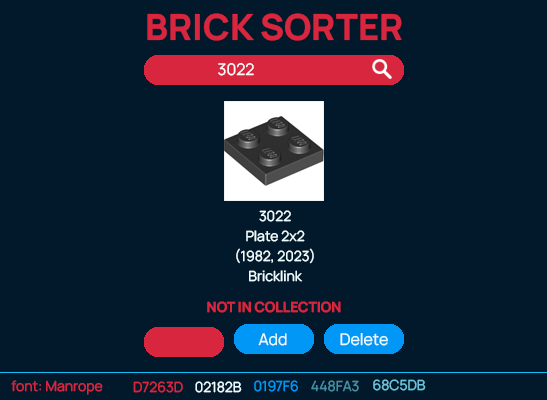
<style>
.page{position:relative;width:547px;height:400px;background:#02182b}
.page>*{position:absolute;margin:0}
.t1{font:36px "ManropeExtraLight-ExtraBold";color:#d7263d}
.t2{font:16px "ManropeExtraLight-Regular";color:#ffffff}
.t3{font:14px/20px "ManropeExtraLight-Regular";color:#edfcff}
.t4{font:14px "ManropeExtraLight-Bold";color:#d7263d}
.t5{font:16px "ManropeExtraLight-Regular";color:#edfcff}
.t6{font:14px "ManropeExtraLight-Regular";color:#d7263d}
.t7{font:14px "ManropeExtraLight-Regular";color:#edfcff}
.t8{font:14px "ManropeExtraLight-Regular";color:#0197f6}
.t9{font:14px "ManropeExtraLight-Regular";color:#448fa3}
.t10{font:14px "ManropeExtraLight-Regular";color:#68c5db}
</style>
<div class="page">
<p class="t1" style="left:147px;top:13px;width:255px;height:28px">BRICK SORTER</p>
<p class="t2" style="left:218px;top:63px;width:36px;height:13px">3022</p>
<p class="t3" style="left:236px;top:210px;width:78px;height:72px;text-align:center">3022<br>Plate 2x2<br>(1982, 2023)<br>Bricklink</p>
<p class="t4" style="left:207px;top:301px;width:134px;height:12px">NOT IN COLLECTION</p>
<p class="t5" style="left:258px;top:333px;width:29px;height:13px">Add</p>
<p class="t5" style="left:340px;top:333px;width:48px;height:13px">Delete</p>
<p class="t6" style="left:11px;top:380px;width:92px;height:15px">font: Manrope</p>
<p class="t6" style="left:133px;top:381px;width:50px;height:12px">D7263D</p>
<p class="t7" style="left:195px;top:381px;width:47px;height:12px">02182B</p>
<p class="t8" style="left:254px;top:380px;width:44px;height:12px">0197F6</p>
<p class="t9" style="left:311px;top:380px;width:48px;height:12px">448FA3</p>
<p class="t10" style="left:373px;top:379px;width:53px;height:12px">68C5DB</p>
</div>
